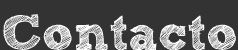
<style>
.page{position:relative;width:238px;height:50px;background:#333333}
.page>*{position:absolute;margin:0}
.t1{font:50px "SketchRockwell";color:#ffffff;scale:1.03 1}
</style>
<div class="page">
<p class="t1" style="left:2px;top:14px;width:234px;height:36px">Contacto</p>
</div>
